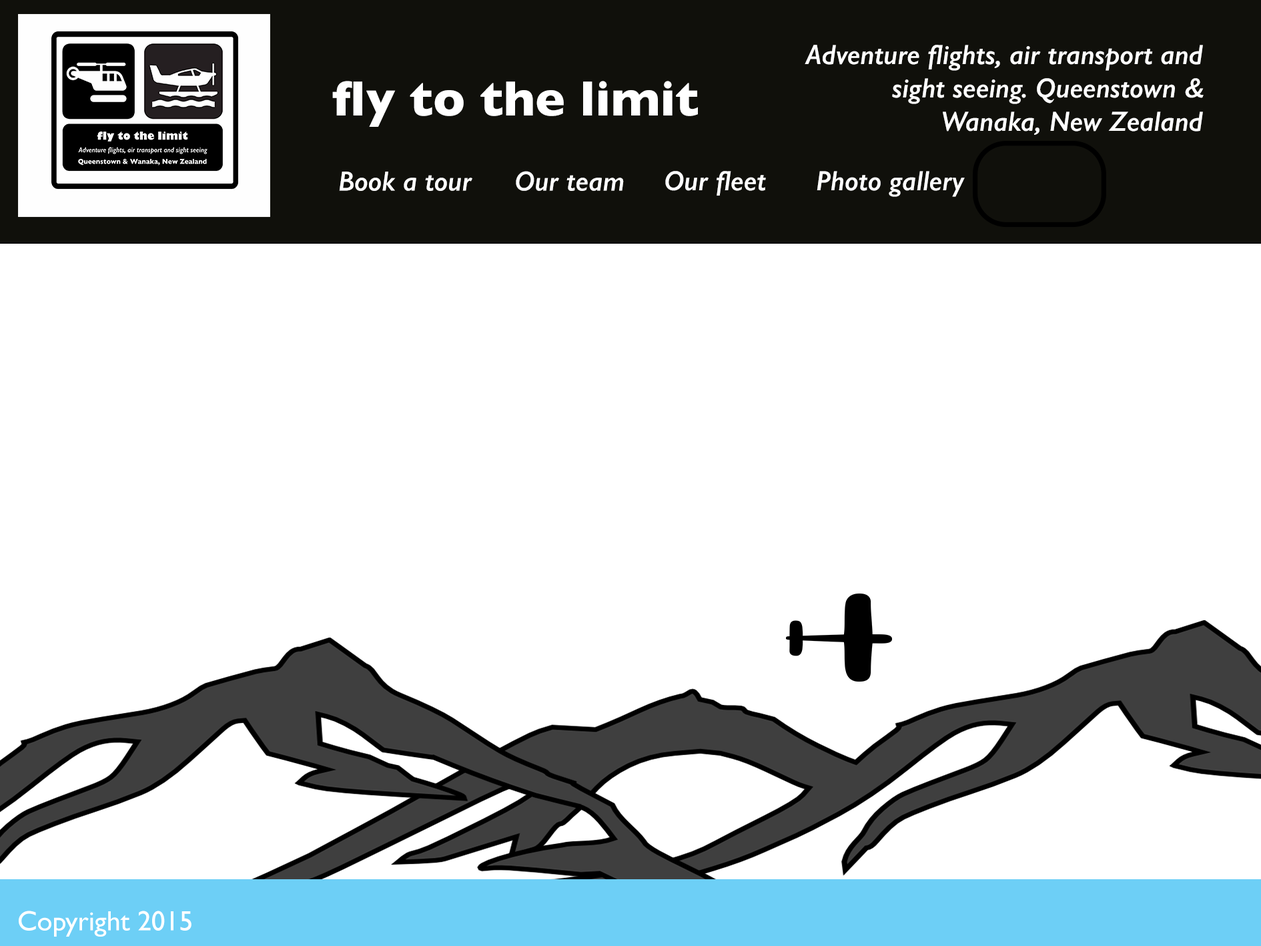
<style>
.page{position:relative;width:1261px;height:946px;background:#ffffff}
.page>*{position:absolute;margin:0}
.t1{font:27.8px "GillSans-SemiBoldItalic";color:#ffffff}
.t2{font:50px "GillSans-Bold";color:#ffffff}
.t3{font:27.8px "GillSans";color:#ffffff}
</style>
<div class="page">
<p class="t1" style="left:805px;top:45px;width:399px;height:90px;text-align:right">Adventure flights, air transport and sight seeing. Queenstown &amp; Wanaka, New Zealand</p>
<p class="t2" style="left:332px;top:81px;width:366px;height:46px">fly to the limit</p>
<p class="t1" style="left:339px;top:171px;width:133px;height:20px">Book a tour</p>
<p class="t1" style="left:516px;top:171px;width:108px;height:20px">Our team</p>
<p class="t1" style="left:665px;top:171px;width:101px;height:25px">Our fleet</p>
<p class="t1" style="left:817px;top:171px;width:148px;height:26px">Photo gallery</p>
<p class="t3" style="left:19px;top:910px;width:173px;height:26px">Copyright 2015</p>
</div>
